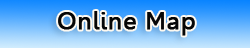
<style>
.page{position:relative;width:250px;height:48px}
.page>*{position:absolute;margin:0}
.t1{font:24px "Leelawadee";letter-spacing:0.025em;color:#060606;font-weight:bold;scale:1.03 1}
</style>
<div class="page">
<p class="t1" style="left:58px;top:11px;width:137px;height:25px">Online Map</p>
</div>
